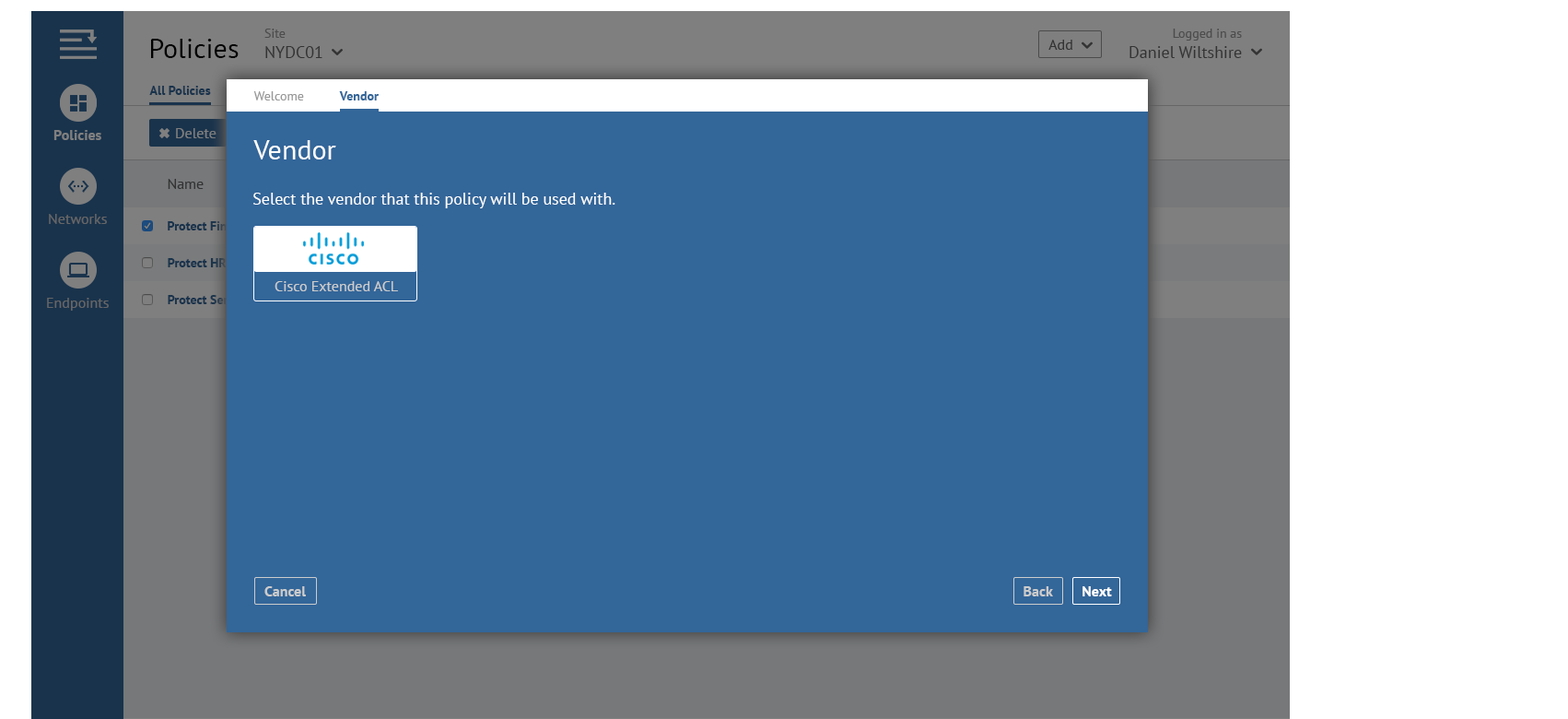
<style>
.page{position:relative;width:1568px;height:719px;background:#336699}
.page>*{position:absolute;margin:0}
.t1{font:16.6px "PTSans-Regular"}
.t2{font:12.9px "PTSans-Regular"}
.t3{font:16.8px "PTSans-Regular"}
.t4{font:13.1px "PTSans-Regular"}
.t5{font:27.6px "PTSans-Regular";color:#000000}
.t6{font:14.7px "PTSans-Regular";color:#333333}
.t7{font:12.8px "PTSans-Bold";color:#19334c}
.t8{font:12.8px "PTSans-Regular";color:#999999}
.t9{font:12.8px "PTSans-Bold";color:#336699}
.t10{font:14.7px "PTSans-Bold";color:#7f7f7f}
.t11{font:14.7px "PTSans-Regular";color:#7f7f7f}
.t12{font:27.6px "PTSans-Regular";color:#ffffff}
.t13{font:16.6px "PTSans-Regular";color:#ffffff}
.t14{font:14.7px "PTSans-Regular";color:#666666}
.t15{font:12.9px "PTSans-Bold"}
.t16{font:12.9px "PTSans-Bold";color:#19334c}
.t17{font:14.7px "PTSans-Regular";color:#cccccc}
.t18{font:14.7px "PTSans-Bold";color:#cccccc}
.t19{font:14.7px "PTSans-Bold";color:#ffffff}
</style>
<div class="page">
<p class="t1" style="left:264px;top:29px;width:58px;height:29px"><span class="t2">Site<br></span>NYDC01</p>
<p class="t3" style="left:1129px;top:29px;width:113px;height:29px;text-align:right"><span class="t4">Logged in as<br></span>Daniel Wiltshire</p>
<p class="t5" style="left:151px;top:39px;width:88px;height:19px">Policies</p>
<p class="t6" style="left:1048px;top:40px;width:24px;height:10px">Add</p>
<p class="t7" style="left:149px;top:86px;width:62px;height:9px">All Policies</p>
<p class="t8" style="left:253px;top:91px;width:51px;height:9px">Welcome</p>
<p class="t9" style="left:339px;top:91px;width:40px;height:9px">Vendor</p>
<p class="t10" style="left:53px;top:130px;width:48px;height:10px">Policies</p>
<p class="t11" style="left:176px;top:128px;width:40px;height:10px">Delete</p>
<p class="t12" style="left:253px;top:140px;width:83px;height:19px">Vendor</p>
<p class="t6" style="left:168px;top:179px;width:36px;height:10px">Name</p>
<p class="t13" style="left:253px;top:193px;width:362px;height:15px">Select the vendor that this policy will be used with.</p>
<p class="t14" style="left:49px;top:214px;width:58px;height:10px">Networks</p>
<p class="t15" style="left:168px;top:221px;width:84px;height:9px">Protect Finance</p>
<p class="t16" style="left:168px;top:258px;width:59px;height:9px">Protect HR</p>
<p class="t17" style="left:275px;top:281px;width:123px;height:10px">Cisco Extended ACL</p>
<p class="t14" style="left:47px;top:298px;width:62px;height:12px">Endpoints</p>
<p class="t15" style="left:168px;top:295px;width:83px;height:9px">Protect Servers</p>
<p class="t18" style="left:264px;top:586px;width:42px;height:10px">Cancel</p>
<p class="t18" style="left:1024px;top:586px;width:29px;height:10px">Back</p>
<p class="t19" style="left:1082px;top:586px;width:30px;height:10px">Next</p>
</div>
